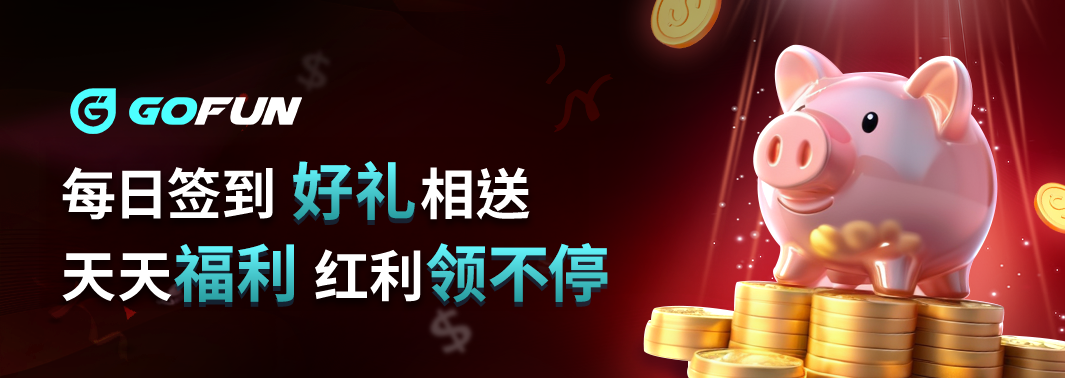
<style>
.page{position:relative;width:1065px;height:378px}
.page>*{position:absolute;margin:0}
.t1{font:62.5px "NotoSansCJKtc-Bold";letter-spacing:-0.01em}
.t2{font:55.5px "NotoSansCJKtc-Bold";letter-spacing:-0.01em;color:#ffffff}
</style>
<div class="page">
<p class="t1" style="left:293px;top:161px;width:122px;height:60px">好礼</p>
<p class="t2" style="left:62px;top:167px;width:211px;height:53px">每日签到</p>
<p class="t2" style="left:421px;top:167px;width:109px;height:53px">相送</p>
<p class="t1" style="left:174px;top:243px;width:120px;height:59px">福利</p>
<p class="t1" style="left:426px;top:243px;width:182px;height:60px">领不停</p>
<p class="t2" style="left:62px;top:253px;width:110px;height:49px">天天</p>
<p class="t2" style="left:315px;top:249px;width:106px;height:53px">红利</p>
</div>
